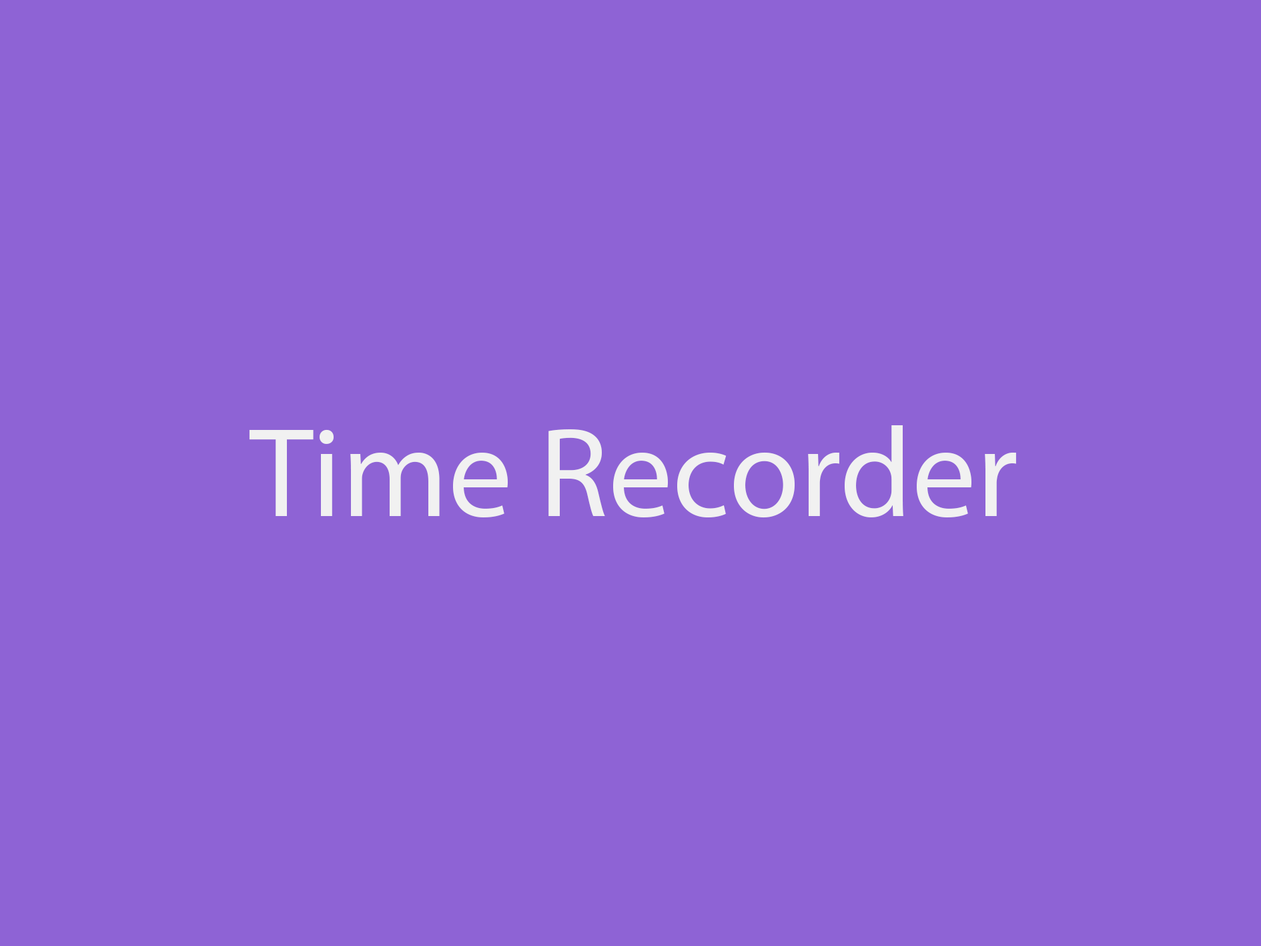
<style>
.page{position:relative;width:1261px;height:946px;background:#8e63d5}
.page>*{position:absolute;margin:0}
.t1{font:127.9px "MyriadPro-Regular";color:#f1f1f1}
</style>
<div class="page">
<p class="t1" style="left:249px;top:425px;width:767px;height:93px">Time Recorder</p>
</div>
